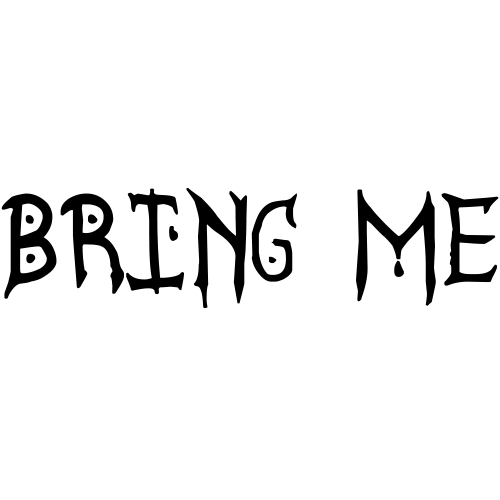
<style>
.page{position:relative;width:500px;height:500px;background:#ffffff}
.page>*{position:absolute;margin:0}
.t1{font:104.8px "SatanycDemoniacSt";color:#000000;font-weight:bold;scale:0.96 1}
</style>
<div class="page">
<p class="t1" style="left:1px;top:187px;width:498px;height:122px">Bring Me</p>
</div>
